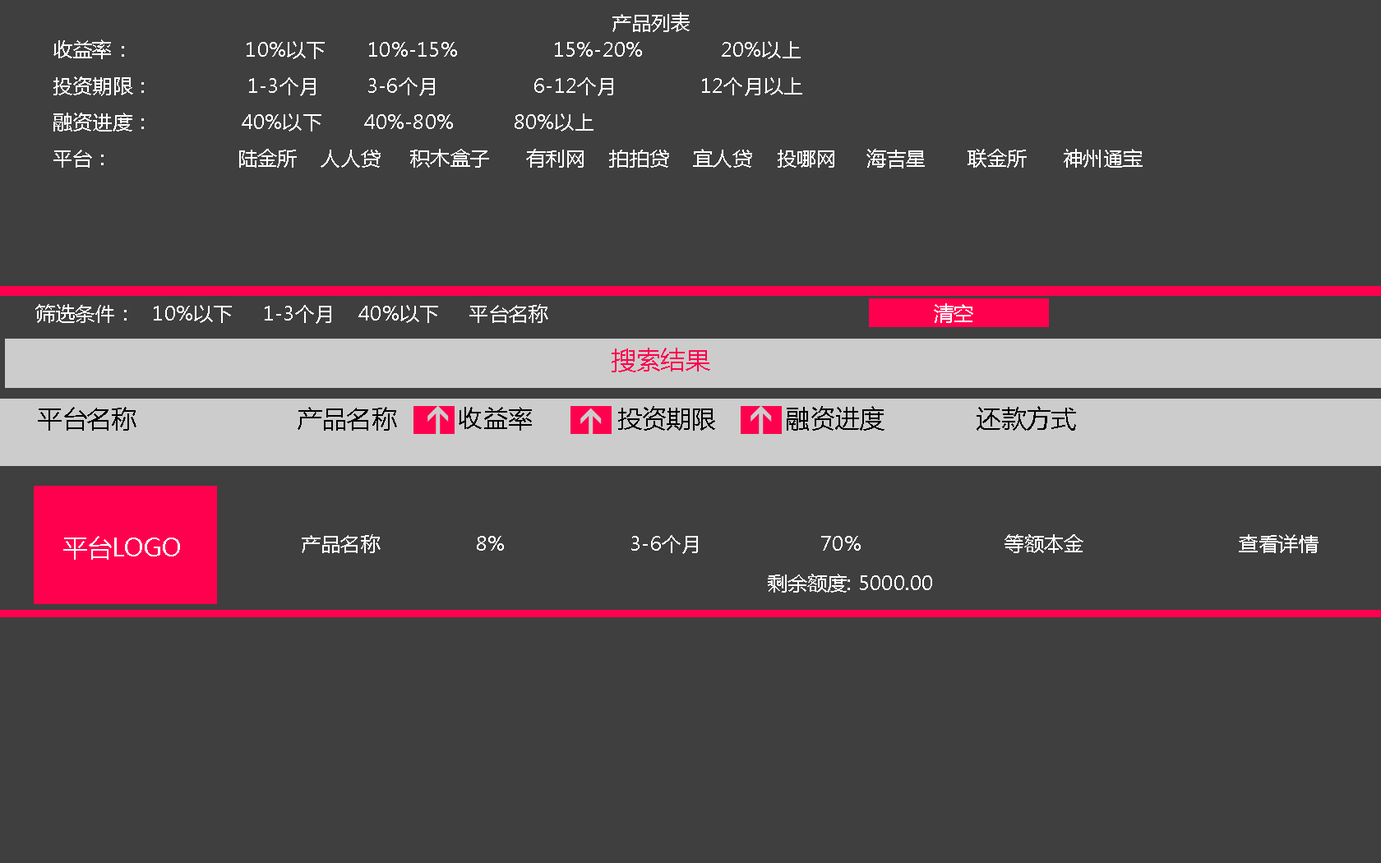
<style>
.page{position:relative;width:1381px;height:863px;background:#3f3f3f}
.page>*{position:absolute;margin:0}
.t1{font:19.7px "MicrosoftYaHei";letter-spacing:0.01em;color:#ffffff}
.t2{font:19.7px/18.1px "MicrosoftYaHei";letter-spacing:0.01em;color:#ffffff}
.t3{font:24.7px "MicrosoftYaHei";letter-spacing:0.01em;color:#ff004e}
.t4{font:24.7px "MicrosoftYaHei";letter-spacing:0.01em;color:#000000}
.t5{font:24.7px "MicrosoftYaHei";letter-spacing:0.01em;color:#ffffff}
</style>
<div class="page">
<p class="t1" style="left:613px;top:12px;width:77px;height:20px">产品列表</p>
<p class="t2" style="left:53px;top:39px;width:1090px;height:130px">收益率：                   10%以下       10%-15%                15%-20%             20%以上<br><br>投资期限：                1-3个月        3-6个月                6-12个月              12个月以上<br><br>融资进度：               40%以下       40%-80%          80%以上 <br><br>平台：                     陆金所    人人贷     积木盒子      有利网    拍拍贷    宜人贷    投哪网     海吉星       联金所      神州通宝</p>
<p class="t1" style="left:35px;top:304px;width:513px;height:20px">筛选条件：   10%以下     1-3个月    40%以下     平台名称</p>
<p class="t1" style="left:934px;top:303px;width:39px;height:20px">清空</p>
<p class="t3" style="left:612px;top:348px;width:98px;height:24px">搜索结果</p>
<p class="t4" style="left:38px;top:406px;width:1038px;height:25px">平台名称                     产品名称        收益率           投资期限         融资进度            还款方式</p>
<p class="t5" style="left:63px;top:536px;width:117px;height:24px">平台LOGO</p>
<p class="t1" style="left:302px;top:534px;width:1017px;height:20px">产品名称                8%                     3-6个月                    70%                        等额本金                          查看详情</p>
<p class="t1" style="left:768px;top:574px;width:164px;height:19px">剩余额度: 5000.00</p>
</div>
